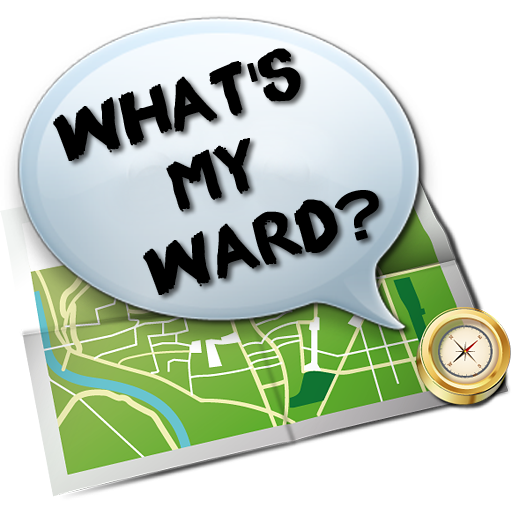
<style>
.page{position:relative;width:512px;height:512px;background:#ffffff}
.page>*{position:absolute;margin:0}
.t1{font:64px "Appopaint";color:#000000;font-weight:bold}
.t2{font:64px "BlairMdITCTTMedium";color:#000000;font-weight:bold}
</style>
<div class="page">
<p class="t1" style="left:53px;top:48px;width:326px;height:247px;text-align:center;rotate:-16deg">What<span class="t2">'</span>s<br>   My <br>    Ward<span class="t2">?</span></p>
</div>
